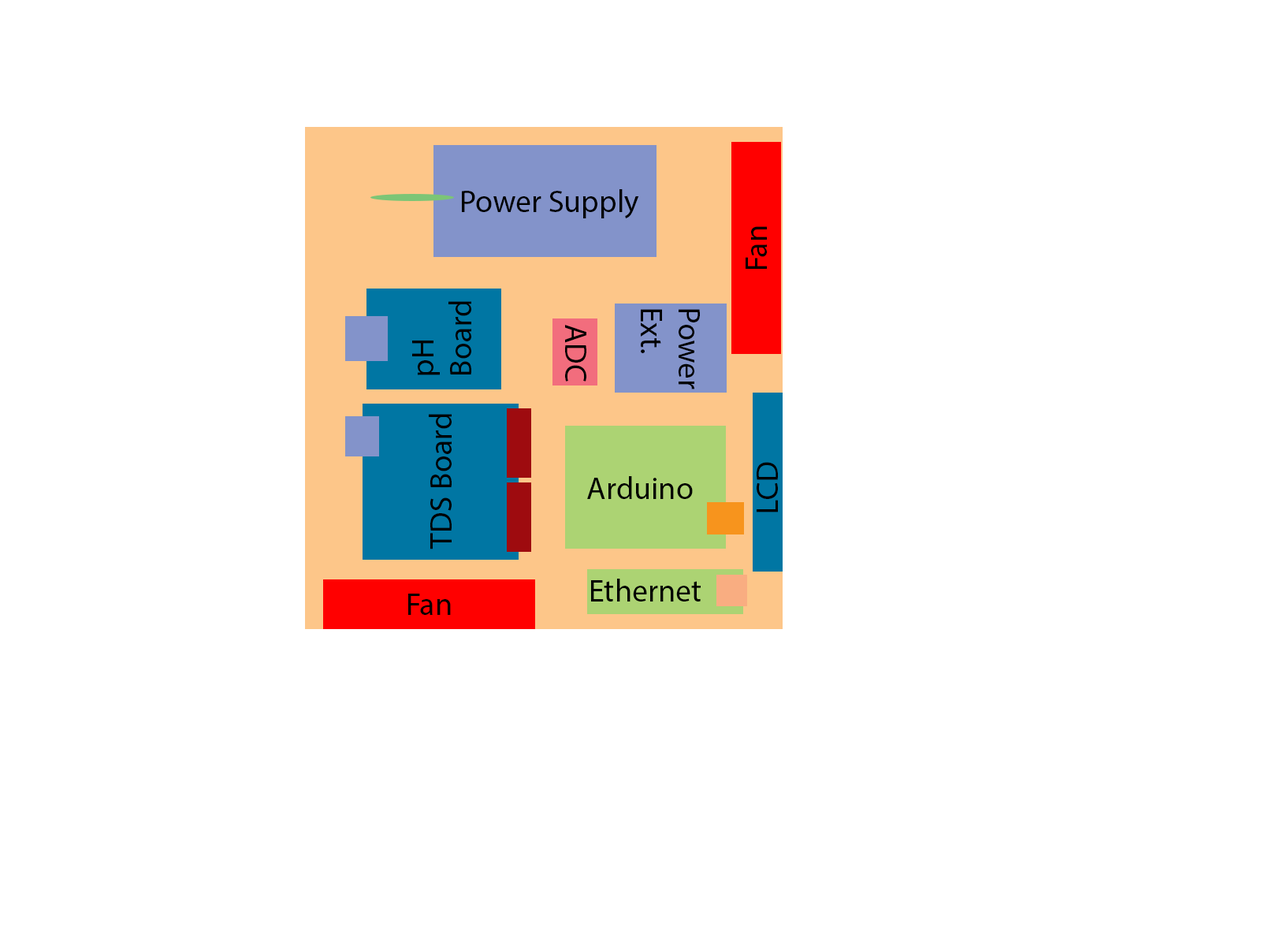
<style>
.page{position:relative;width:1261px;height:946px;background:#ffffff}
.page>*{position:absolute;margin:0}
.t1{font:31.2px "MyriadPro-Regular";color:#000000}
.t2{font:31.5px "MyriadPro-Regular";color:#000000}
</style>
<div class="page">
<p class="t1" style="left:462px;top:189px;width:177px;height:29px">Power Supply</p>
<p class="t2" style="left:746px;top:226px;width:21px;height:43px;rotate:-90deg">Fan</p>
<p class="t2" style="left:412px;top:301px;width:59px;height:74px;rotate:-90deg">pH<br>Board</p>
<p class="t2" style="left:641px;top:309px;width:59px;height:80px;rotate:90deg">Power<br>Ext.</p>
<p class="t2" style="left:565px;top:325px;width:21px;height:56px;rotate:90deg">ADC</p>
<p class="t2" style="left:429px;top:414px;width:23px;height:135px;rotate:-90deg">TDS Board</p>
<p class="t2" style="left:757px;top:462px;width:21px;height:50px;rotate:-90deg">LCD</p>
<p class="t2" style="left:587px;top:476px;width:106px;height:23px">Arduino</p>
<p class="t2" style="left:591px;top:578px;width:110px;height:23px">Ethernet</p>
<p class="t2" style="left:408px;top:593px;width:43px;height:22px">Fan</p>
</div>
